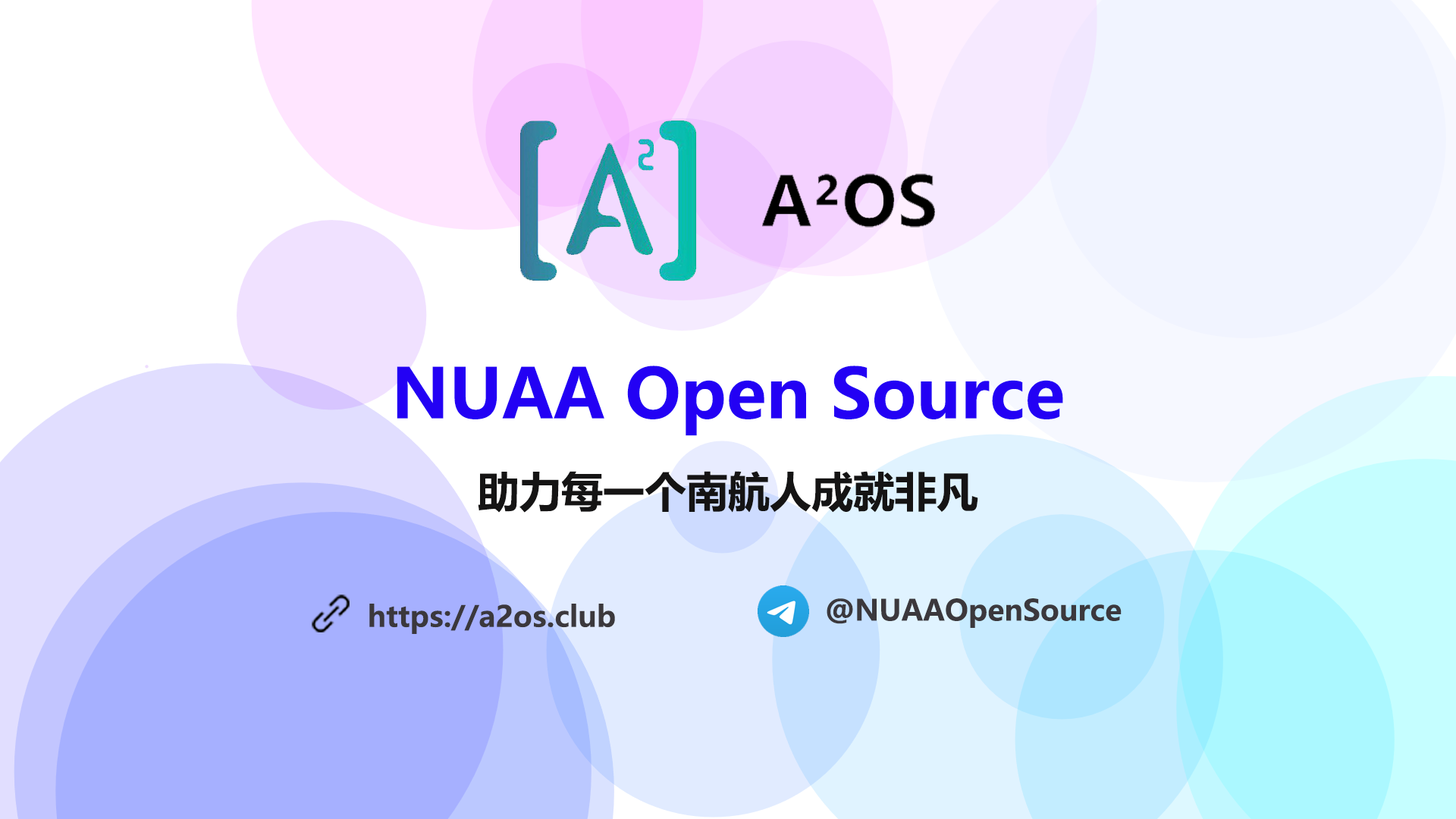
<style>
.page{position:relative;width:1456px;height:819px}
.page>*{position:absolute;margin:0}
.t1{font:68.2px "MicrosoftYaHei-Bold";color:#2301f4}
.t2{font:41.7px "MicrosoftYaHei-Bold";color:#151414}
.t3{font:28.8px "MicrosoftYaHei-Bold";color:#3b383c}
</style>
<div class="page">
<p class="t1" style="left:397px;top:366px;width:666px;height:70px">NUAA Open Source</p>
<p class="t2" style="left:478px;top:471px;width:500px;height:42px">助力每一个南航人成就非凡</p>
<p class="t3" style="left:369px;top:604px;width:246px;height:30px">https://a2os.club</p>
<p class="t3" style="left:827px;top:598px;width:295px;height:30px">@NUAAOpenSource</p>
</div>
